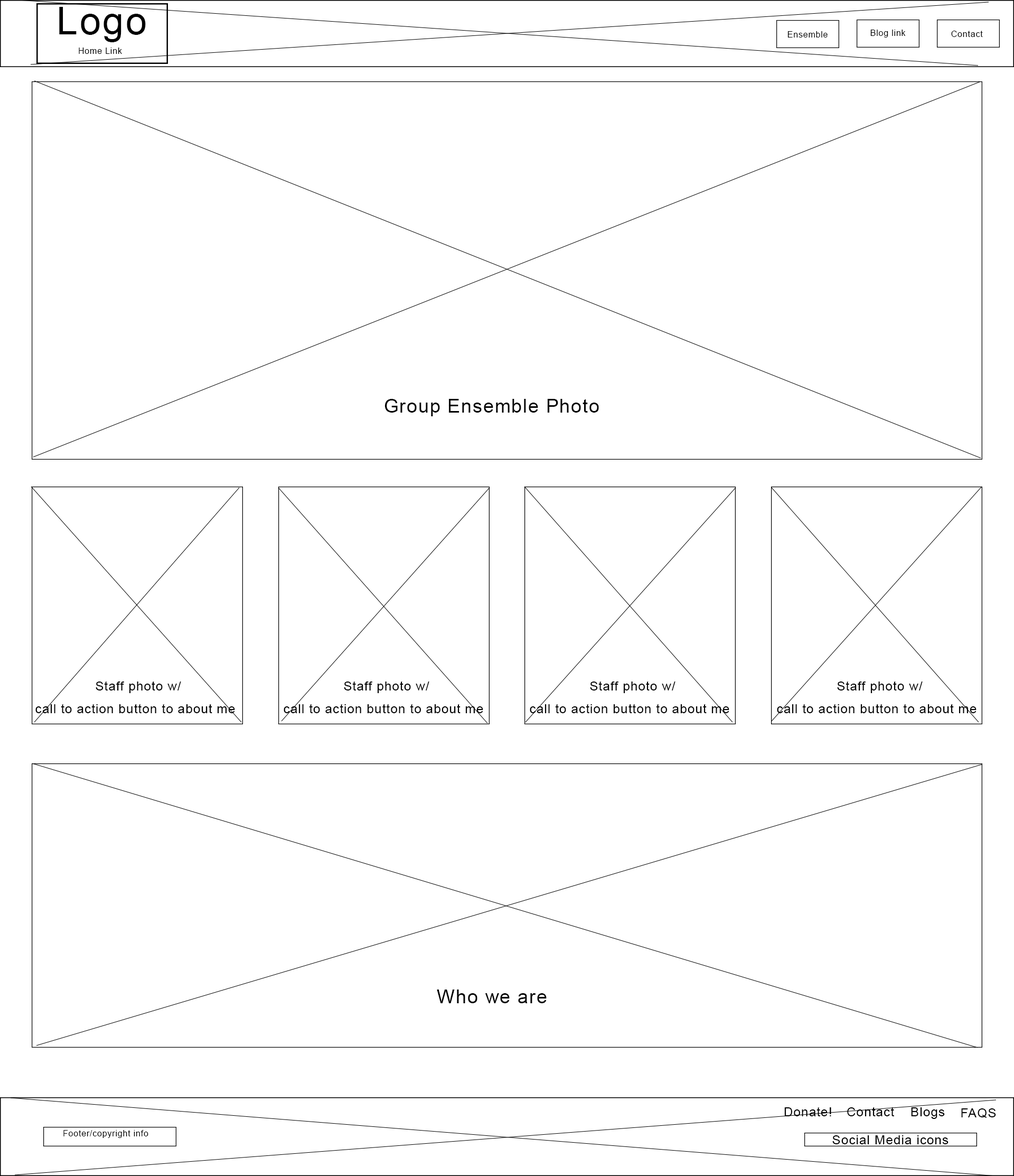
<style>
.page{position:relative;width:1014px;height:1176px;background:#ffffff}
.page>*{position:absolute;margin:0}
.t1{font:38px "ArialMT";letter-spacing:0.05em;color:#000000}
.t2{font:8.5px "ArialMT";letter-spacing:0.05em;color:#000000}
.t3{font:19px "ArialMT";letter-spacing:0.05em;color:#000000}
.t4{font:12.7px "ArialMT";letter-spacing:0.05em;color:#000000}
</style>
<div class="page">
<p class="t1" style="left:59px;top:7px;width:87px;height:35px">Logo</p>
<p class="t2" style="left:870px;top:30px;width:36px;height:8px">Blog link</p>
<p class="t2" style="left:788px;top:31px;width:40px;height:7px">Ensemble</p>
<p class="t2" style="left:951px;top:31px;width:32px;height:6px">Contact</p>
<p class="t2" style="left:79px;top:48px;width:43px;height:6px">Home Link</p>
<p class="t3" style="left:385px;top:399px;width:214px;height:17px">Group Ensemble Photo</p>
<p class="t4" style="left:35px;top:681px;width:200px;height:32px;text-align:center">Staff photo w/<br>call to action button to about me</p>
<p class="t4" style="left:284px;top:681px;width:199px;height:32px;text-align:center">Staff photo w/<br>call to action button to about me</p>
<p class="t4" style="left:530px;top:681px;width:199px;height:32px;text-align:center">Staff photo w/<br>call to action button to about me</p>
<p class="t4" style="left:777px;top:681px;width:200px;height:32px;text-align:center">Staff photo w/<br>call to action button to about me</p>
<p class="t3" style="left:437px;top:989px;width:110px;height:14px">Who we are</p>
<p class="t4" style="left:784px;top:1107px;width:47px;height:9px">Donate!</p>
<p class="t4" style="left:847px;top:1107px;width:47px;height:9px">Contact</p>
<p class="t4" style="left:911px;top:1107px;width:34px;height:12px">Blogs</p>
<p class="t4" style="left:961px;top:1108px;width:35px;height:10px">FAQS</p>
<p class="t2" style="left:63px;top:1130px;width:85px;height:8px">Footer/copyright info</p>
<p class="t4" style="left:832px;top:1135px;width:117px;height:9px">Social Media icons</p>
</div>
